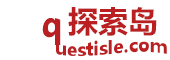
<style>
.page{position:relative;width:170px;height:60px;background:#ffffff}
.page>*{position:absolute;margin:0}
.t1{font:30px "MicrosoftYaHei-Bold";color:#ba2021}
.t2{font:18px "MicrosoftYaHei-Bold";color:#ba2021}
</style>
<div class="page">
<p class="t1" style="left:68px;top:7px;width:89px;height:29px">探索岛</p>
<p class="t1" style="left:42px;top:18px;width:19px;height:27px">q</p>
<p class="t2" style="left:56px;top:39px;width:111px;height:18px">uestisle.com</p>
</div>
